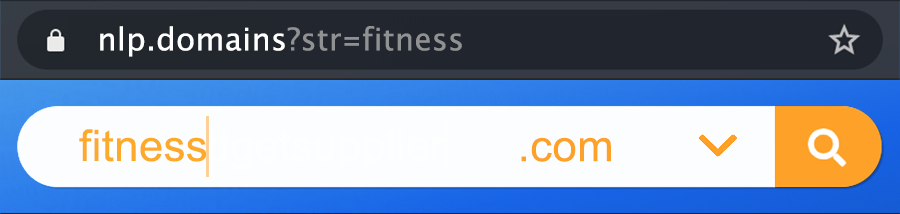
<style>
.page{position:relative;width:900px;height:214px;background:#fcfdfe}
.page>*{position:absolute;margin:0}
.t1{font:31px "LucidaGrande";letter-spacing:0.01em;color:#ffffff}
.t2{font:31px "LucidaGrande";letter-spacing:0.01em;color:#909192}
.t3{font:31px "LucidaGrande-Bold";letter-spacing:0.01em;color:#909192;scale:0.8 1}
.t4{font:43.5px "ArialMT";letter-spacing:0.01em;color:#fda929}
.t5{font:43.6px "ArialMT";letter-spacing:0.01em;color:#fda128}
</style>
<div class="page">
<p class="t1" style="left:100px;top:26px;width:362px;height:31px">nlp.domains<span class="t2">?str</span><span class="t3">=</span><span class="t2">fitness</span></p>
<p class="t4" style="left:79px;top:129px;width:127px;height:33px">fitness</p>
<p class="t5" style="left:521px;top:137px;width:90px;height:25px">.com</p>
</div>
